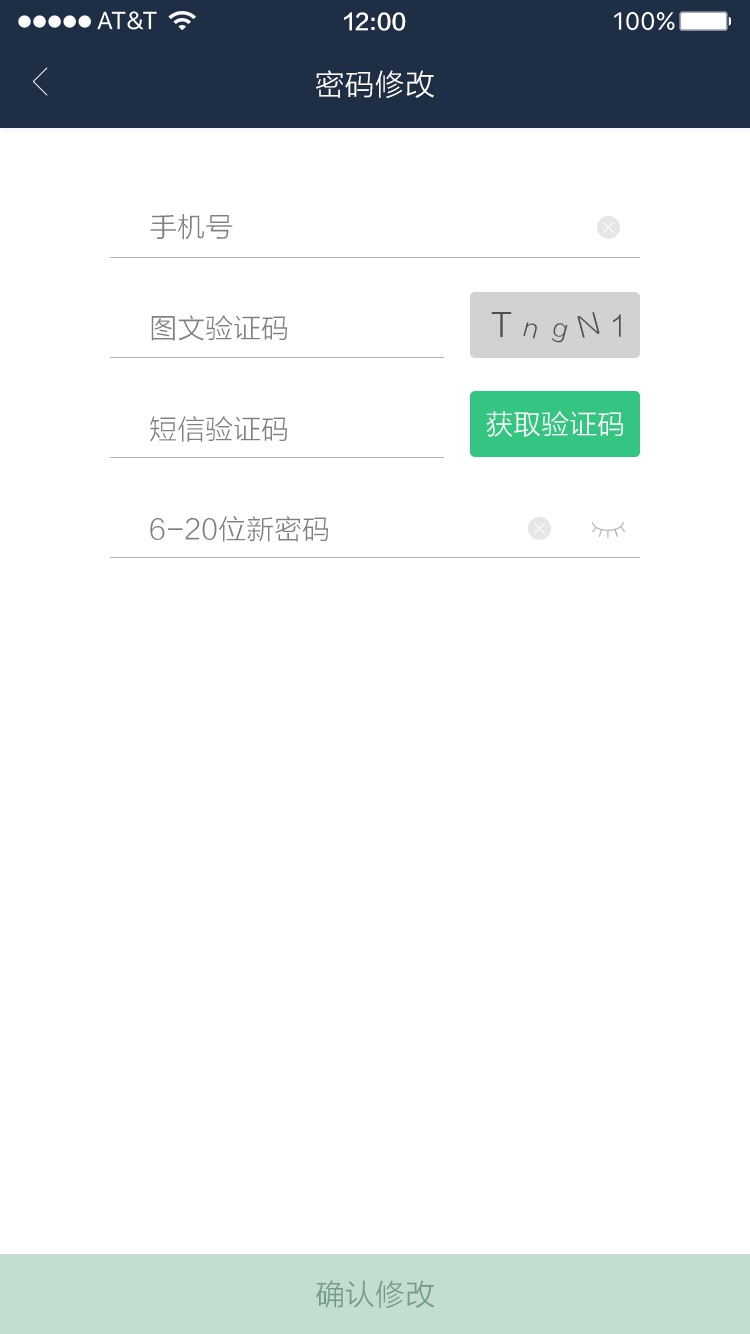
<style>
.page{position:relative;width:750px;height:1334px;background:#ffffff}
.page>*{position:absolute;margin:0}
.t1{font:22px "FZLTZHK--GBK1-0";color:#ffffff}
.t2{font:30px "FZLTXHK";color:#ffffff}
.t3{font:28px "FZLTXHK";color:#808080}
.t4{font:32.8px "FZLTXHK";color:#4f4f4f}
.t5{font:28.9px "FZLTXHK";color:#4f4f4f}
.t6{font:25.4px "FZLTXHK";color:#4f4f4f}
.t7{font:28px "FZLTXHK";color:#ffffff}
.t8{font:30px "FZLTXHK";color:#769988}
</style>
<div class="page">
<p class="t1" style="left:344px;top:12px;width:62px;height:19px">12:00</p>
<p class="t2" style="left:316px;top:70px;width:118px;height:28px">密码修改</p>
<p class="t3" style="left:150px;top:214px;width:83px;height:26px">手机号</p>
<p class="t3" style="left:151px;top:315px;width:136px;height:26px">图文验证码</p>
<p class="t4" style="left:491px;top:312px;width:21px;height:25px">T</p>
<p class="t5" style="left:577px;top:312px;width:23px;height:26px;rotate:-15deg">N</p>
<p class="t5" style="left:613px;top:314px;width:8px;height:23px">1</p>
<p class="t6" style="left:523px;top:322px;width:14px;height:17px;rotate:15deg">n</p>
<p class="t6" style="left:551px;top:323px;width:17px;height:20px;rotate:15deg">g</p>
<p class="t7" style="left:486px;top:411px;width:137px;height:26px">获取验证码</p>
<p class="t3" style="left:150px;top:416px;width:137px;height:26px">短信验证码</p>
<p class="t3" style="left:150px;top:516px;width:178px;height:26px">6-20位新密码</p>
<p class="t8" style="left:315px;top:1280px;width:120px;height:29px">确认修改</p>
</div>
